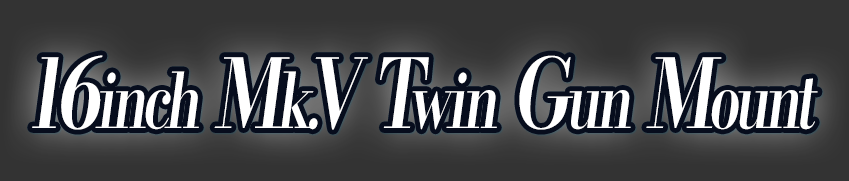
<style>
.page{position:relative;width:849px;height:181px;background:#333333}
.page>*{position:absolute;margin:0}
.t1{font:76.8px "KochoStd-Heavy";letter-spacing:-0.08em;color:#ffffff;font-style:italic;scale:0.75 1}
.t2{font:96px "KochoStd-Heavy";letter-spacing:-0.08em;color:#ffffff;font-style:italic;scale:0.75 1}
</style>
<div class="page">
<p class="t1" style="left:32px;top:55px;width:786px;height:75px"><span class="t2">16</span>inch<span class="t2"> M</span>k.<span class="t2">V T</span>win<span class="t2"> G</span>un<span class="t2"> M</span>ount</p>
</div>
